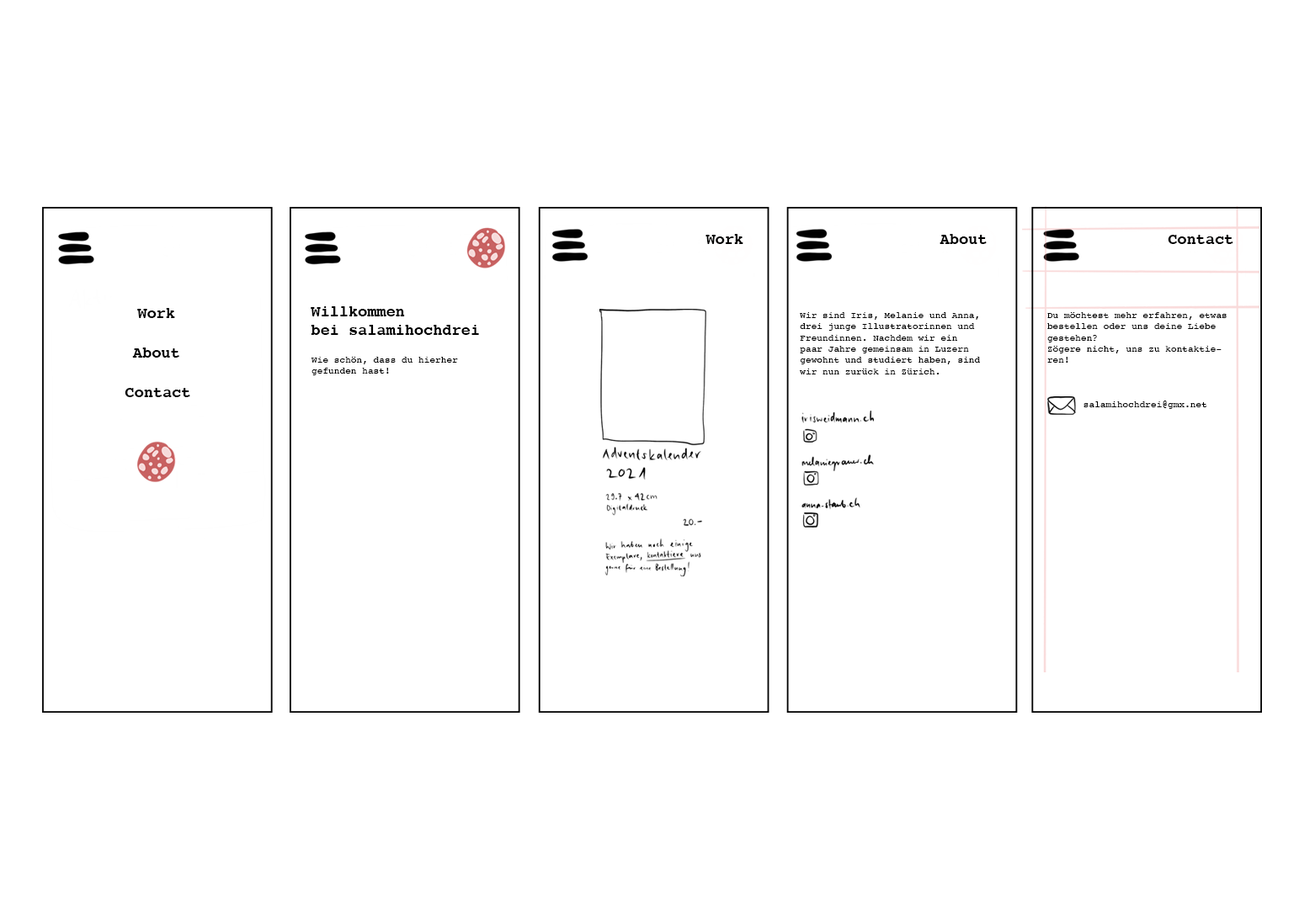
<style>
.page{position:relative;width:1299px;height:918px;background:#ffffff}
.page>*{position:absolute;margin:0}
.t1{font:15.6px "Courier-Bold";color:#000000}
.t2{font:9.4px "Courier";color:#000000}
</style>
<div class="page">
<p class="t1" style="left:705px;top:234px;width:38px;height:10px">Work</p>
<p class="t1" style="left:939px;top:234px;width:47px;height:10px">About</p>
<p class="t1" style="left:1167px;top:235px;width:66px;height:9px">Contact</p>
<p class="t1" style="left:137px;top:308px;width:38px;height:10px">Work</p>
<p class="t1" style="left:311px;top:306px;width:168px;height:29px">Willkommen<br>bei salamihochdrei</p>
<p class="t2" style="left:800px;top:312px;width:180px;height:63px">Wir sind Iris, Melanie und Anna, drei junge Illustratorinnen und Freundinnen. Nachdem wir ein paar Jahre gemeinsam in Luzern gewohnt und studiert haben, sind wir nun zurück in Zürich.</p>
<p class="t2" style="left:1047px;top:312px;width:179px;height:51px">Du möchtest mehr erfahren, etwas bestellen oder uns deine Liebe gestehen?<br>Zögere nicht, uns zu kontaktieren!</p>
<p class="t1" style="left:132px;top:348px;width:47px;height:10px">About</p>
<p class="t2" style="left:311px;top:357px;width:147px;height:18px">Wie schön, dass du hierher gefunden hast!</p>
<p class="t1" style="left:125px;top:388px;width:65px;height:9px">Contact</p>
<p class="t2" style="left:1083px;top:401px;width:124px;height:8px">salamihochdrei@gmx.net</p>
</div>
